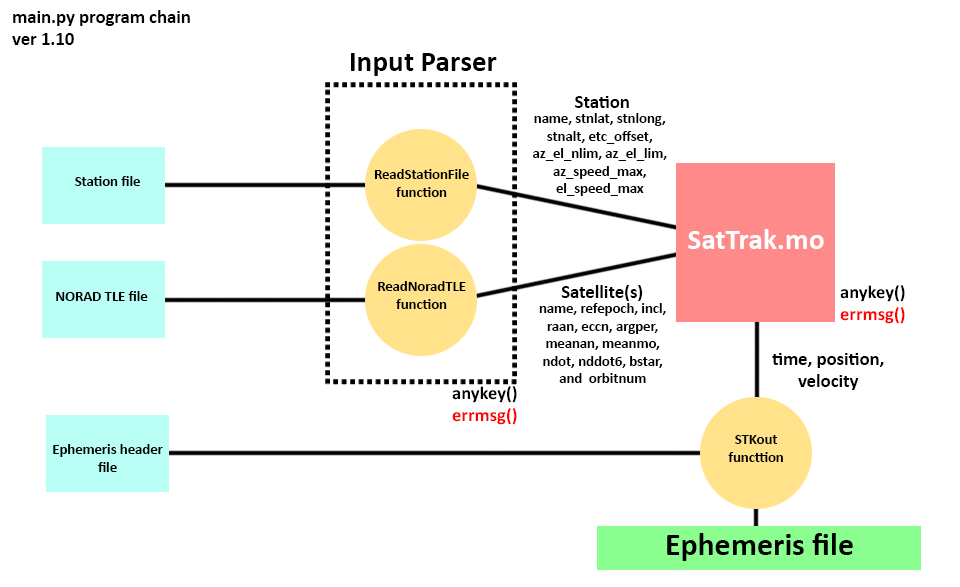
<style>
.page{position:relative;width:960px;height:587px;background:#ffffff}
.page>*{position:absolute;margin:0}
.t1{font:18.7px "Calibri-Bold";color:#000000}
.t2{font:29.3px "Calibri-Bold";color:#000000}
.t3{font:14.7px "Calibri-Bold";color:#000000}
.t4{font:29.3px "Calibri-Bold";color:#ffffff}
.t5{font:18.5px "Calibri-Bold";color:#000000}
.t6{font:18.5px "Calibri-Bold";color:#ff0000}
.t7{font:32px "Calibri-Bold";color:#000000}
</style>
<div class="page">
<p class="t1" style="left:12px;top:10px;width:178px;height:35px">main.py program chain ver 1.10</p>
<p class="t2" style="left:351px;top:53px;width:146px;height:23px">Input Parser</p>
<p class="t1" style="left:575px;top:96px;width:54px;height:12px">Station</p>
<p class="t3" style="left:533px;top:113px;width:134px;height:83px;text-align:center">name, stnlat, stnlong, stnalt, etc_offset, az_el_nlim, az_el_lim, az_speed_max, el_speed_max</p>
<p class="t3" style="left:374px;top:169px;width:95px;height:28px;text-align:center">ReadStationFile function</p>
<p class="t3" style="left:75px;top:176px;width:65px;height:10px">Station file</p>
<p class="t4" style="left:688px;top:229px;width:136px;height:20px">SatTrak.mo</p>
<p class="t3" style="left:378px;top:281px;width:88px;height:28px;text-align:center">ReadNoradTLE function</p>
<p class="t3" style="left:56px;top:291px;width:92px;height:10px">NORAD TLE file</p>
<p class="t1" style="left:561px;top:285px;width:82px;height:16px">Satellite(s)</p>
<p class="t5" style="left:840px;top:285px;width:65px;height:39px">anykey() <span class="t6">errmsg()</span></p>
<p class="t3" style="left:539px;top:303px;width:127px;height:80px;text-align:center">name, refepoch, incl, raan, eccn, argper, meanan, meanmo, ndot, nddot6, bstar, and  orbitnum</p>
<p class="t1" style="left:772px;top:353px;width:112px;height:37px;text-align:center">time, position, velocity</p>
<p class="t5" style="left:452px;top:386px;width:65px;height:39px">anykey() <span class="t6">errmsg()</span></p>
<p class="t3" style="left:728px;top:435px;width:55px;height:27px;text-align:center">STKout functtion</p>
<p class="t3" style="left:53px;top:444px;width:110px;height:28px;text-align:center">Ephemeris header file</p>
<p class="t7" style="left:667px;top:533px;width:186px;height:28px">Ephemeris file</p>
</div>
